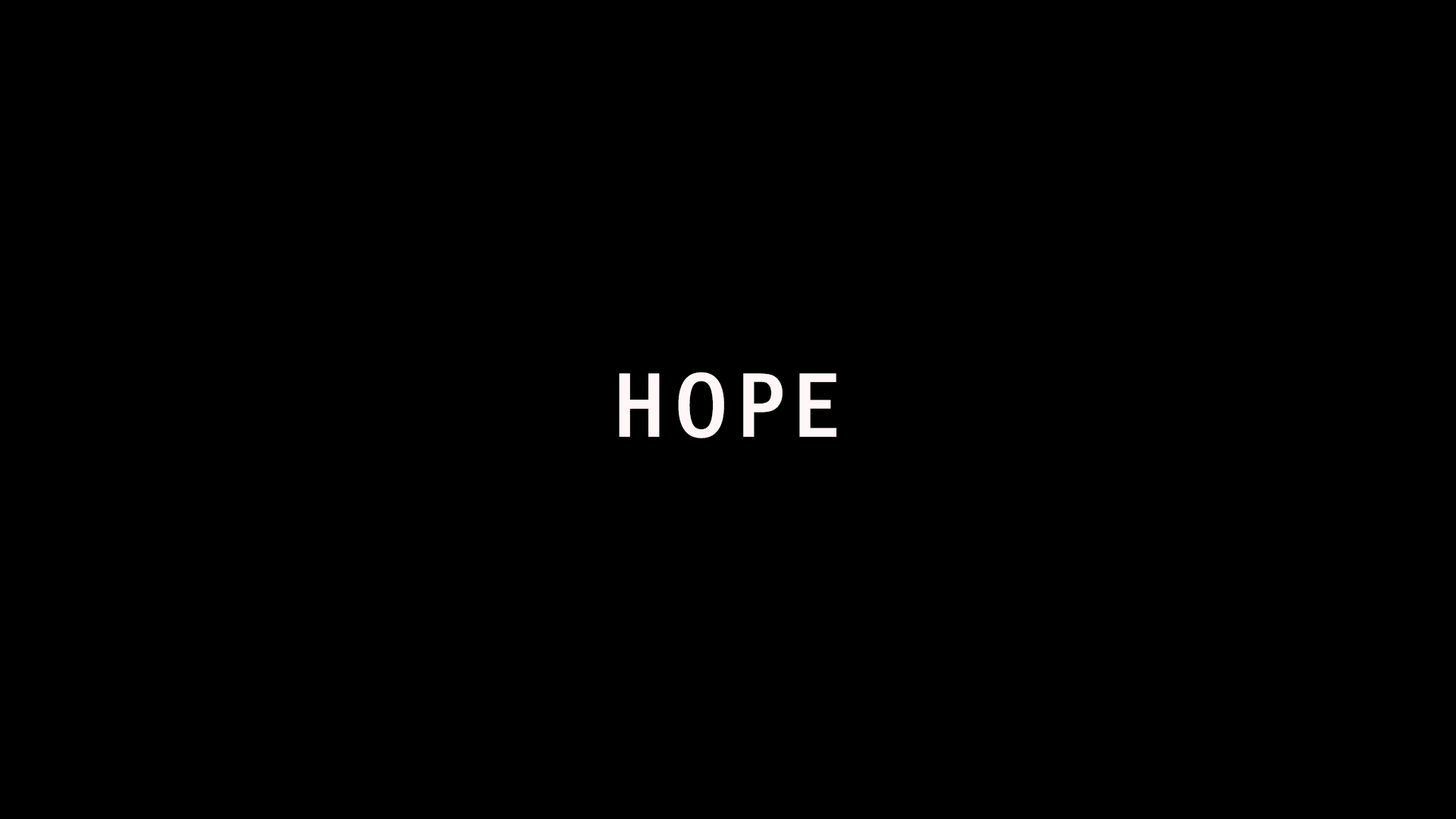
<style>
.page{position:relative;width:1456px;height:819px;background:#000000}
.page>*{position:absolute;margin:0}
.t1{font:94.8px "FranklinGothic-MediumCond";letter-spacing:0.1em;color:#fff7f7;text-transform:uppercase}
</style>
<div class="page">
<p class="t1" style="left:619px;top:372px;width:217px;height:66px">HOPE</p>
</div>
